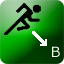
<style>
.page{position:relative;width:64px;height:64px}
.page>*{position:absolute;margin:0}
.t1{font:13.9px "Verdana";color:#ffffff}
</style>
<div class="page">
<p class="t1" style="left:52px;top:46px;width:8px;height:11px">B</p>
</div>
